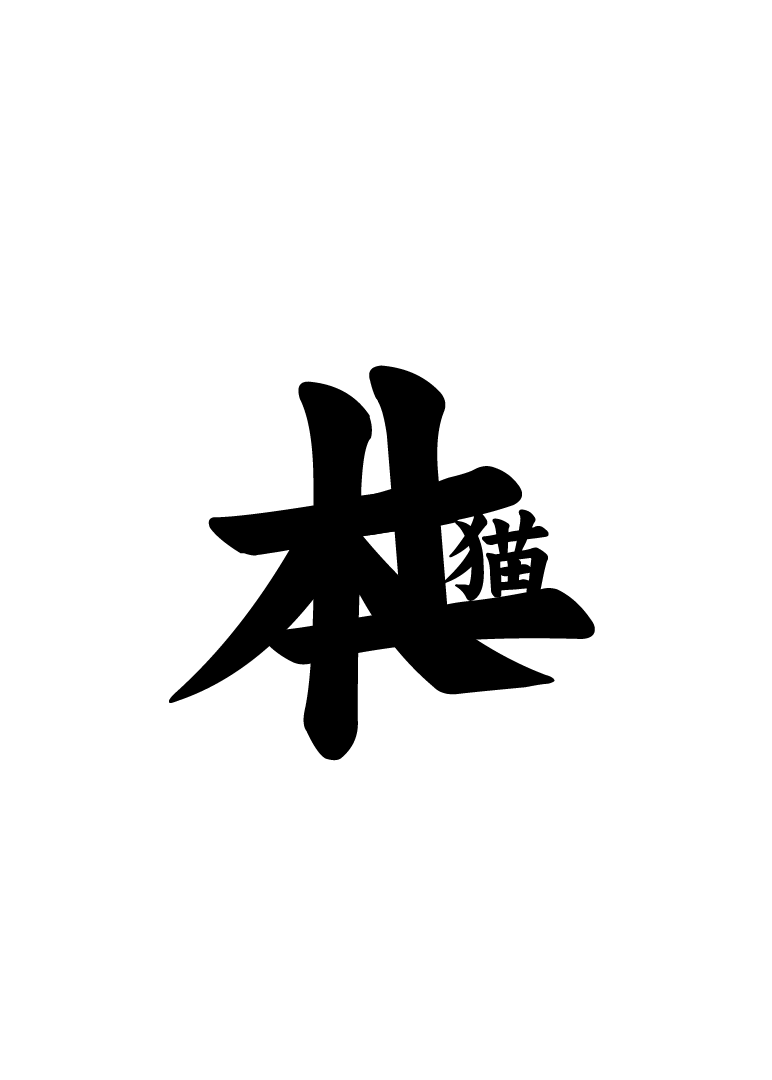
<style>
.page{position:relative;width:772px;height:1080px;background:#ffffff}
.page>*{position:absolute;margin:0}
.t1{font:394.2px "FZCKJW--GB1-0";letter-spacing:-0.04em;color:#000000}
.t2{font:434.2px "FZCKJW--GB1-0";letter-spacing:-0.04em;color:#000000}
.t3{font:122.3px "FZCKJW--GB1-0";letter-spacing:-0.04em;color:#000000}
</style>
<div class="page">
<p class="t1" style="left:261px;top:365px;width:334px;height:300px;rotate:-5deg">土</p>
<p class="t2" style="left:169px;top:381px;width:386px;height:380px">木</p>
<p class="t3" style="left:443px;top:509px;width:106px;height:92px">猫</p>
</div>
